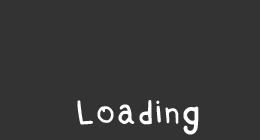
<style>
.page{position:relative;width:260px;height:140px;background:#333333}
.page>*{position:absolute;margin:0}
.t1{font:45px "Brutal_bounce-Regular";color:#ffffff}
</style>
<div class="page">
<p class="t1" style="left:77px;top:100px;width:122px;height:35px">Loading</p>
</div>
